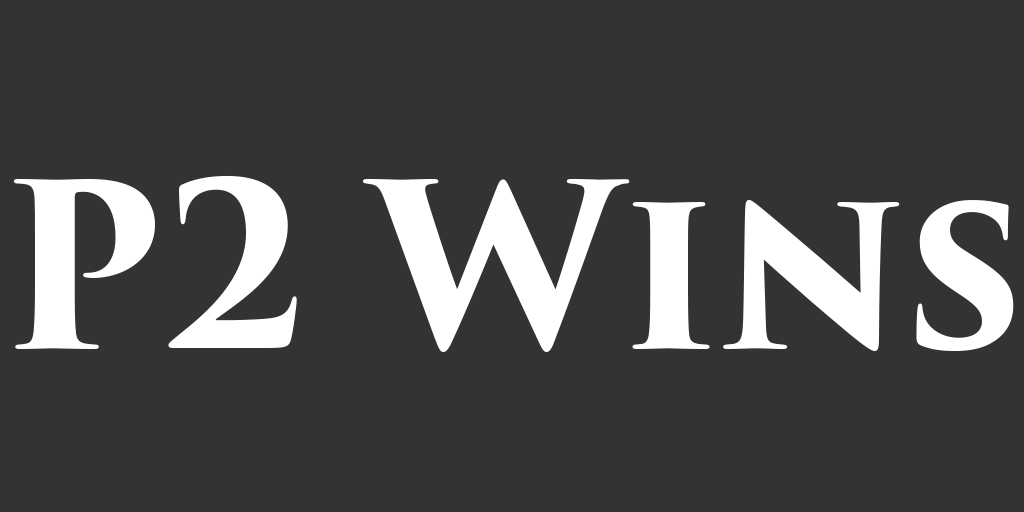
<style>
.page{position:relative;width:1024px;height:512px;background:#333333}
.page>*{position:absolute;margin:0}
.t1{font:224.1px "TrajanPro3-Bold";color:#ffffff}
</style>
<div class="page">
<p class="t1" style="left:13px;top:175px;width:1001px;height:177px">P2 Wins</p>
</div>
